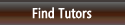
<style>
.page{position:relative;width:125px;height:25px}
.page>*{position:absolute;margin:0}
.t1{font:14px "SegoeCondensed";color:#ffffff;font-weight:bold}
</style>
<div class="page">
<p class="t1" style="left:32px;top:7px;width:60px;height:12px">Find Tutors</p>
</div>
